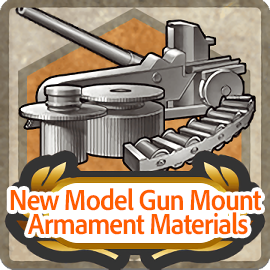
<style>
.page{position:relative;width:270px;height:270px}
.page>*{position:absolute;margin:0}
.t1{font:30px/24px "AdobeClean-Bold";letter-spacing:-0.04em;color:#ff5d00;scale:0.9 1}
</style>
<div class="page">
<p class="t1" style="left:10px;top:188px;width:251px;height:47px;text-align:center">New Model Gun Mount <br>Armament Materials</p>
</div>
